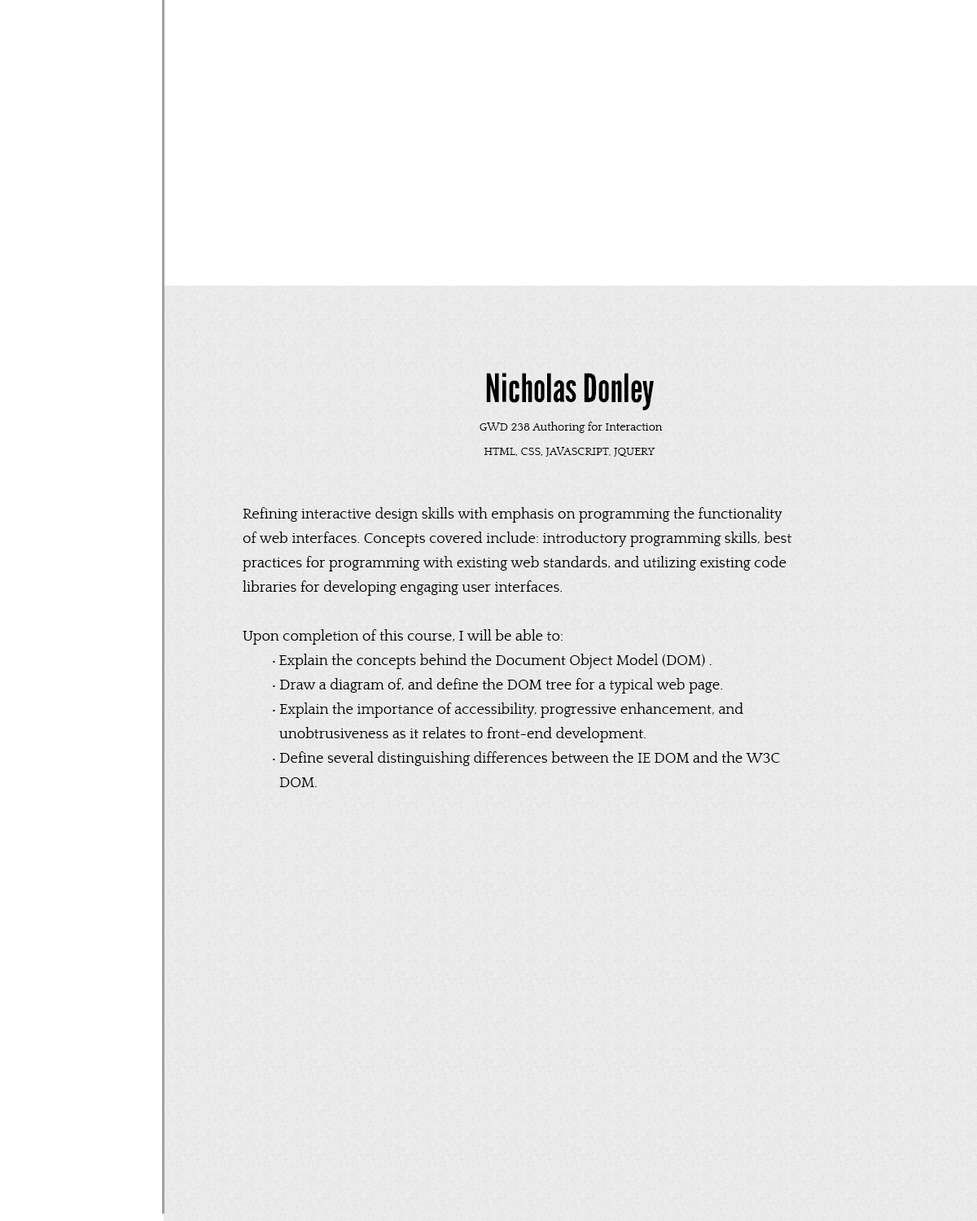
<style>
.page{position:relative;width:977px;height:1221px;background:#ffffff}
.page>*{position:absolute;margin:0}
.t1{font:39.3px "LeagueGothic-Regular";color:#000000}
.t2{font:11.4px/24.4px "Quattrocento";color:#000000}
.t3{font:14.7px/24.4px "Quattrocento";color:#000000}
.t4{font:14.7px/24.4px "MyriadPro-Regular";color:#000000}
</style>
<div class="page">
<p class="t1" style="left:486px;top:373px;width:168px;height:37px">Nicholas Donley</p>
<p class="t2" style="left:479px;top:422px;width:184px;height:35px;text-align:center">GWD 238 Authoring for Interaction<br>HTML, CSS, JAVASCRIPT, JQUERY</p>
<p class="t3" style="left:243px;top:507px;width:549px;height:280px">Refining interactive design skills with emphasis on programming the functionality of web interfaces. Concepts covered include: introductory programming skills, best practices for programming with existing web standards, and utilizing existing code libraries for developing engaging user interfaces.<br><br>Upon completion of this course, I will be able to:<br> • Explain the concepts behind the Document Object Model (DOM) .<br> • Draw a diagram of, and define the DOM tree for a typical web page.<br> • Explain the importance of accessibility, progressive enhancement, and<br>   unobtrusiveness as it relates to front-end development.<br> • Define several distinguishing differences between the IE DOM and the W3C     DOM.<br><br><span class="t4">●</span>      Use existing JavaScript frameworks to facilitate interface development.<br><br><span class="t4">●</span>      Define and apply the fundamental components of programming: Variables, Arrays, Functions, Parameters, Properties, Methods, Repeat Loops, Conditional Statements, Expressions, and Scope.<br><br><span class="t4">●</span>      Write and use custom scripts to manipulate the DOM.<br><br><span class="t4">●</span>      Describe industry best practices related to front-end development.</p>
</div>
